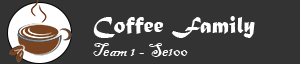
<style>
.page{position:relative;width:300px;height:64px;background:#333333}
.page>*{position:absolute;margin:0}
.t1{font:20px "BlackadderITC-Regular";color:#ffffff}
.t2{font:24px "MaturaMTScriptCapitals";color:#ffffff}
</style>
<div class="page">
<p class="t1" style="left:93px;top:16px;width:162px;height:41px"><span class="t2">Coffee Family<br></span>Team 1 - Se100</p>
</div>
